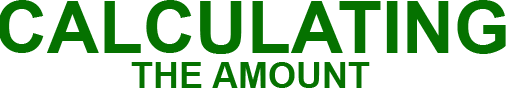
<style>
.page{position:relative;width:506px;height:88px;background:#ffffff}
.page>*{position:absolute;margin:0}
.t1{font:72px "Arial-BoldMT";color:#057200}
.t2{font:36px "Arial-BoldMT";color:#057200}
</style>
<div class="page">
<p class="t1" style="left:0px;top:0px;width:506px;height:54px">CALCULATING</p>
<p class="t2" style="left:131px;top:62px;width:239px;height:26px">THE AMOUNT</p>
</div>
